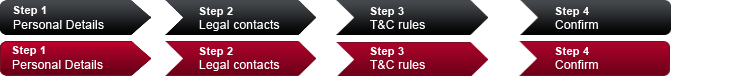
<style>
.page{position:relative;width:740px;height:76px;background:#ffffff}
.page>*{position:absolute;margin:0}
.t1{font:12px/15px "ArialMT";letter-spacing:0.02em;color:#ffffff}
.t2{font:11px/15px "Arial-BoldMT";letter-spacing:0.02em;color:#ffffff}
.t3{font:12px "ArialMT";letter-spacing:0.02em;color:#ffffff}
.t4{font:11px "Arial-BoldMT";letter-spacing:0.02em;color:#ffffff}
</style>
<div class="page">
<p class="t1" style="left:13px;top:6px;width:91px;height:23px"><span class="t2">Step 1<br></span>Personal Details</p>
<p class="t3" style="left:199px;top:7px;width:81px;height:24px"><span class="t4">Step 2<br></span>Legal contacts</p>
<p class="t3" style="left:370px;top:7px;width:55px;height:22px"><span class="t4">Step 3<br></span>T&amp;C rules</p>
<p class="t3" style="left:555px;top:7px;width:43px;height:22px"><span class="t4">Step 4<br></span>Confirm</p>
<p class="t1" style="left:12px;top:46px;width:91px;height:23px"><span class="t2">Step 1<br></span>Personal Details</p>
<p class="t3" style="left:199px;top:47px;width:81px;height:24px"><span class="t4">Step 2<br></span>Legal contacts</p>
<p class="t3" style="left:370px;top:47px;width:55px;height:22px"><span class="t4">Step 3<br></span>T&amp;C rules</p>
<p class="t3" style="left:555px;top:47px;width:43px;height:22px"><span class="t4">Step 4<br></span>Confirm</p>
</div>
